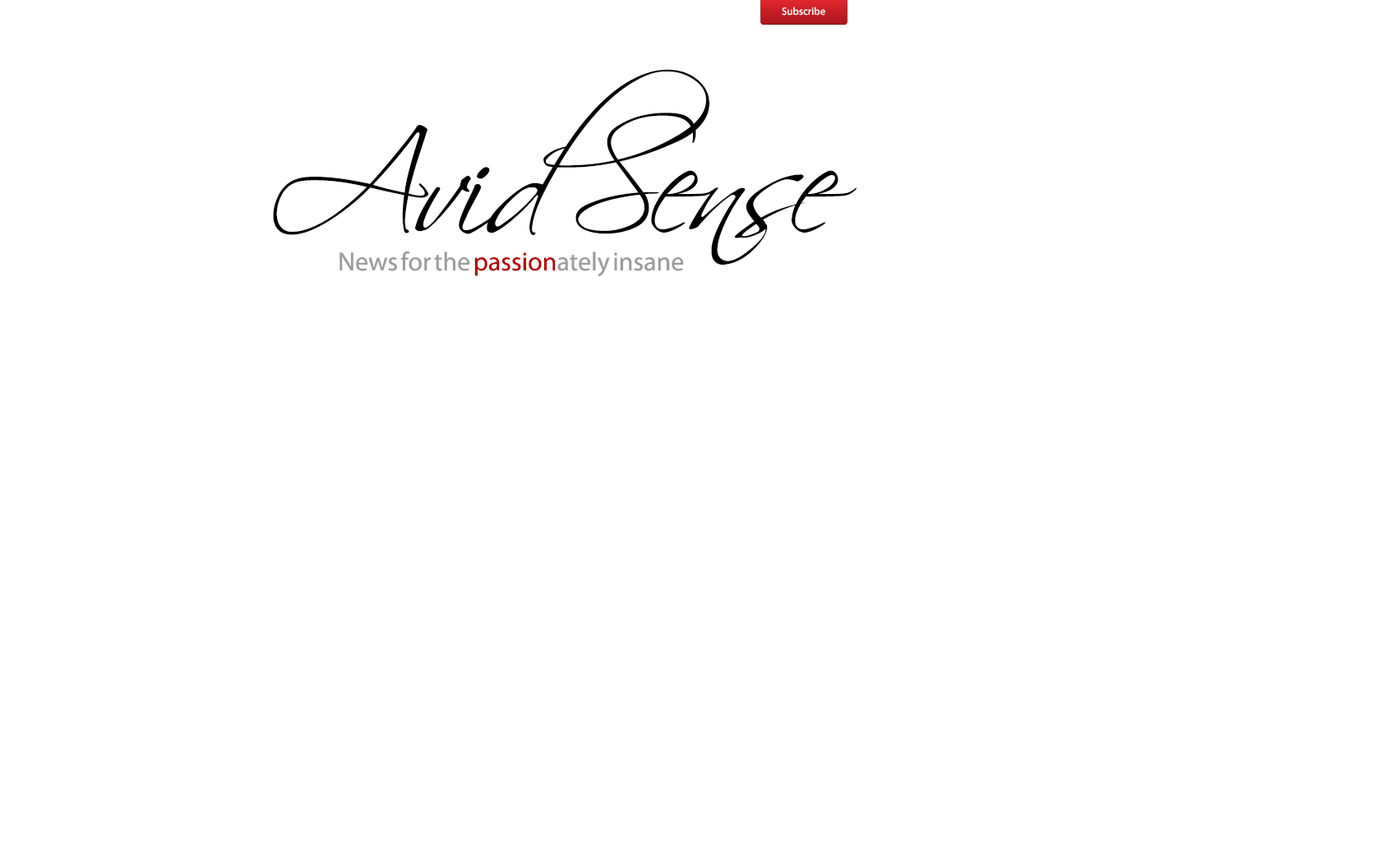
<style>
.page{position:relative;width:1381px;height:863px;background:#ffffff}
.page>*{position:absolute;margin:0}
.t1{font:10.7px "Myriad-Roman";color:#ffffff}
.t2{font:141.4px "Scriptina";color:#000000}
.t3{font:26.3px "MyriadPro-Regular";color:#9b9b9b}
.t4{font:26.3px "MyriadPro-Regular";color:#b50000}
</style>
<div class="page">
<p class="t1" style="left:782px;top:7px;width:43px;height:9px">Subscribe</p>
<p class="t2" style="left:273px;top:69px;width:584px;height:196px">Avid Sense</p>
<p class="t3" style="left:340px;top:251px;width:344px;height:26px">News for the <span class="t4">passion</span>ately insane</p>
</div>
